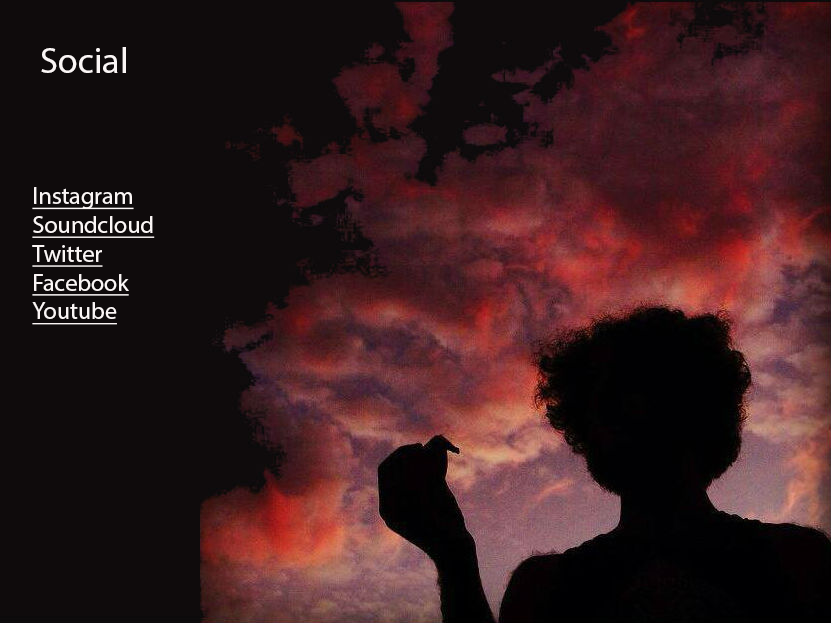
<style>
.page{position:relative;width:831px;height:623px;background:#0f0b0c}
.page>*{position:absolute;margin:0}
.t1{font:36px "MyriadPro-Regular";color:#fbf6f6}
.t2{font:24px "MyriadPro-Regular";color:#fbf6f6;text-decoration:underline}
</style>
<div class="page">
<p class="t1" style="left:41px;top:47px;width:85px;height:26px">Social</p>
<p class="t2" style="left:32px;top:187px;width:123px;height:138px">Instagram<br>Soundcloud<br>Twitter<br>Facebook<br>Youtube</p>
</div>
